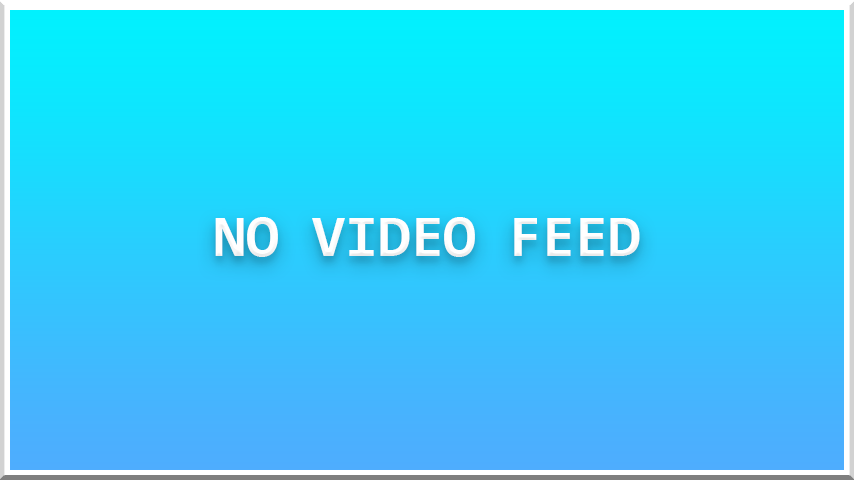
<style>
.page{position:relative;width:854px;height:480px}
.page>*{position:absolute;margin:0}
.t1{font:60px "Consolas-Bold";color:#ffffff}
</style>
<div class="page">
<p class="t1" style="left:215px;top:217px;width:425px;height:40px">NO VIDEO FEED</p>
</div>
